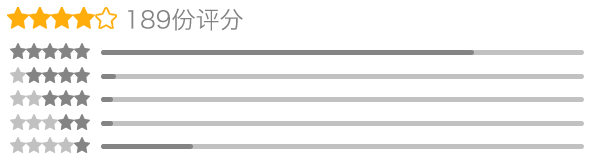
<style>
.page{position:relative;width:591px;height:160px;background:#ffffff}
.page>*{position:absolute;margin:0}
.t1{font:24px "HiraginoSansGB-W3";color:#838383}
</style>
<div class="page">
<p class="t1" style="left:128px;top:8px;width:115px;height:23px">189份评分</p>
</div>
